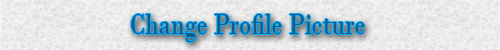
<style>
.page{position:relative;width:500px;height:50px}
.page>*{position:absolute;margin:0}
.t1{font:30px "BodoniMT";color:#0f5c89;scale:0.83 1}
</style>
<div class="page">
<p class="t1" style="left:131px;top:14px;width:234px;height:28px">Change Profile Picture</p>
</div>
